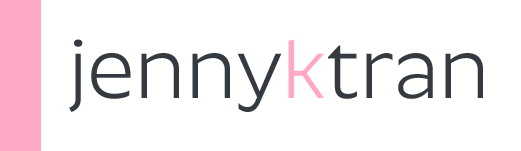
<style>
.page{position:relative;width:521px;height:151px;background:#ffffff}
.page>*{position:absolute;margin:0}
.t1{font:83.3px "Roundo-Regular";color:#343a40}
.t2{font:83.3px "Roundo-Regular";color:#ffa8c3}
</style>
<div class="page">
<p class="t1" style="left:69px;top:39px;width:414px;height:73px">jenny<span class="t2">k</span>tran</p>
</div>
